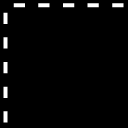
<style>
.page{position:relative;width:128px;height:128px;background:#000000}
.page>*{position:absolute;margin:0}
.t1{font:30px "Verdana-Bold";color:#ffffff}
</style>
<div class="page">
<p class="t1" style="left:13px;top:3px;width:111px;height:5px;rotate:180deg">- - - - -</p>
<p class="t1" style="left:3px;top:12px;width:5px;height:111px;rotate:90deg">- - - - -</p>
</div>
